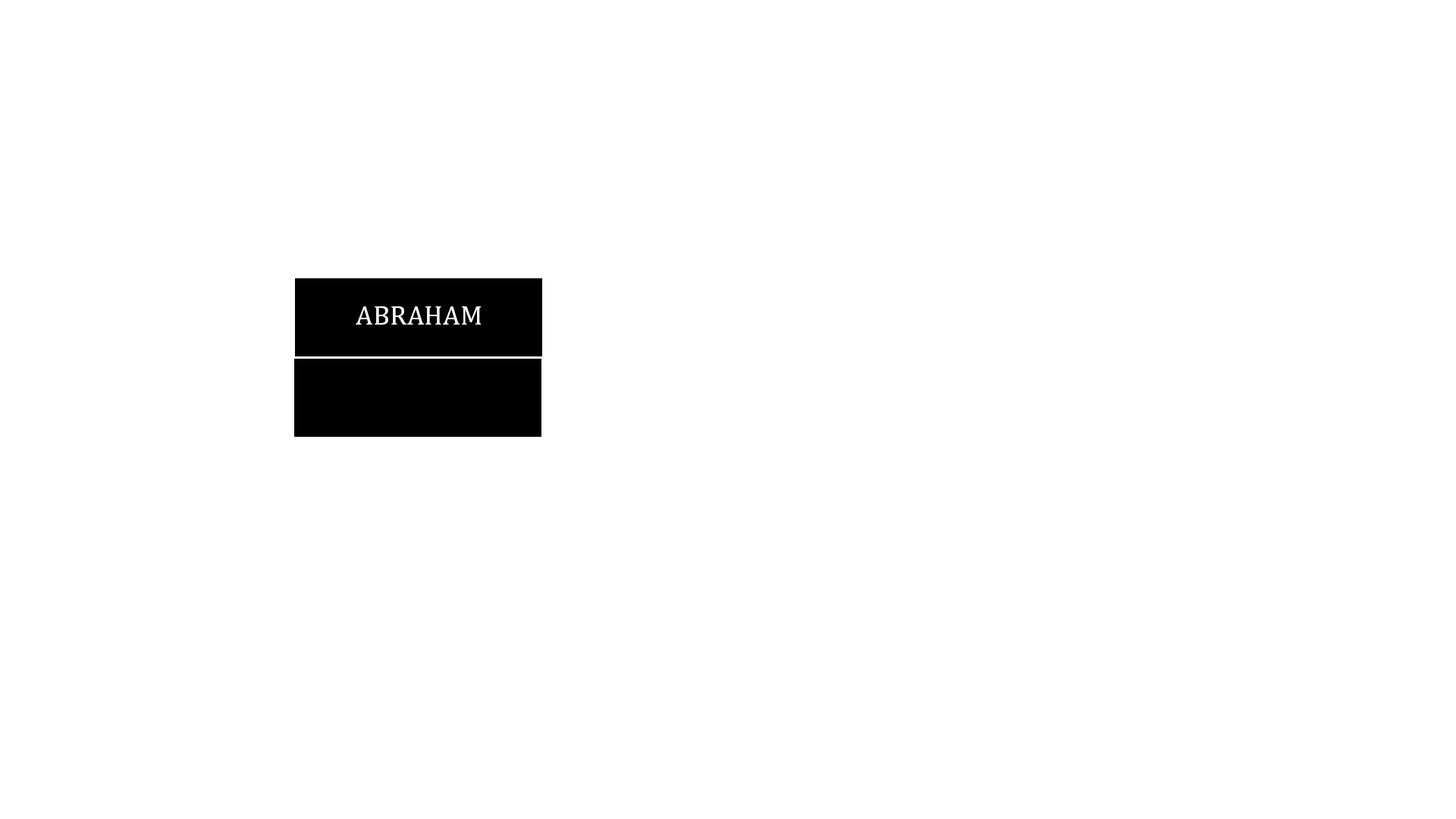
<style>
.page{position:relative;width:1456px;height:819px;background:#ffffff}
.page>*{position:absolute;margin:0}
.t1{font:27.6px "Cambria";color:#ffffff}
</style>
<div class="page">
<p class="t1" style="left:356px;top:306px;width:126px;height:19px">ABRAHAM</p>
</div>
